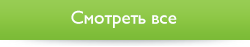
<style>
.page{position:relative;width:250px;height:47px}
.page>*{position:absolute;margin:0}
.t1{font:19px "Gals";color:#ffffff}
</style>
<div class="page">
<p class="t1" style="left:71px;top:10px;width:106px;height:18px">Смотреть все</p>
</div>
